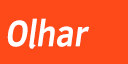
<style>
.page{position:relative;width:128px;height:64px;background:#fe4a18}
.page>*{position:absolute;margin:0}
.t1{font:37.8px "FogSansIt";color:#ffffff;scale:0.87 1}
</style>
<div class="page">
<p class="t1" style="left:7px;top:18px;width:83px;height:31px">Olhar</p>
</div>
